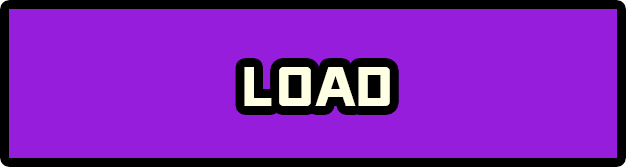
<style>
.page{position:relative;width:626px;height:167px;background:#971ddd}
.page>*{position:absolute;margin:0}
.t1{font:90px "ONRAMP";color:#ffffe3}
</style>
<div class="page">
<p class="t1" style="left:244px;top:67px;width:146px;height:39px">load</p>
</div>
